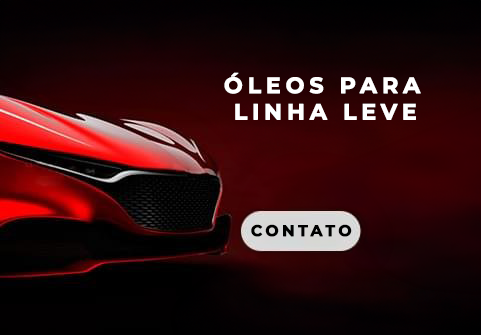
<style>
.page{position:relative;width:481px;height:335px}
.page>*{position:absolute;margin:0}
.t1{font:22px "Montserrat-Bold";letter-spacing:0.2em;color:#ffffff;font-weight:bold}
.t2{font:15.5px "Montserrat-Bold";letter-spacing:0.2em;color:#000000;font-weight:bold}
</style>
<div class="page">
<p class="t1" style="left:224px;top:72px;width:197px;height:48px;text-align:center">ÓLEOS PARA <br>LINHA LEVE</p>
<p class="t2" style="left:251px;top:224px;width:101px;height:13px">CONTATO</p>
</div>
